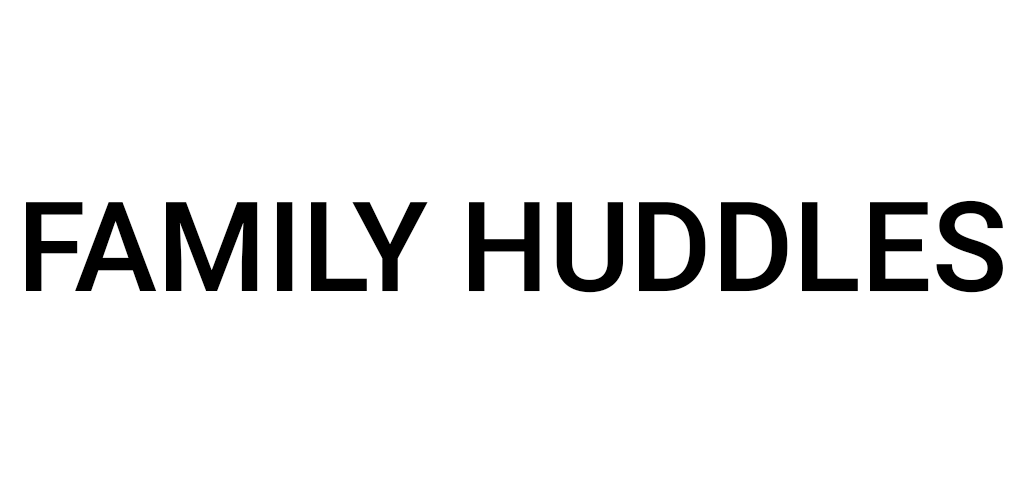
<style>
.page{position:relative;width:1024px;height:500px;background:#ffffff}
.page>*{position:absolute;margin:0}
.t1{font:125px "Roboto-Medium";color:#000000}
</style>
<div class="page">
<p class="t1" style="left:26px;top:200px;width:977px;height:93px">FAMILY HUDDLES</p>
</div>
